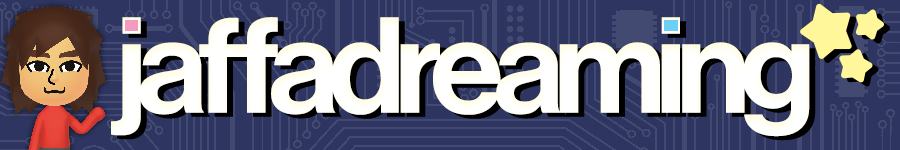
<style>
.page{position:relative;width:900px;height:150px;background:#2e3561}
.page>*{position:absolute;margin:0}
.t1{font:133.3px "NeueHaasDisplay-Mediu";letter-spacing:-0.07em;color:#ffffff}
</style>
<div class="page">
<p class="t1" style="left:111px;top:17px;width:699px;height:120px">jaffadreaming</p>
</div>
